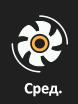
<style>
.page{position:relative;width:78px;height:104px;background:#202020}
.page>*{position:absolute;margin:0}
.t1{font:12px "Calibri-Bold";color:#ffffff}
</style>
<div class="page">
<p class="t1" style="left:24px;top:83px;width:38px;height:14px">Сред.</p>
</div>
